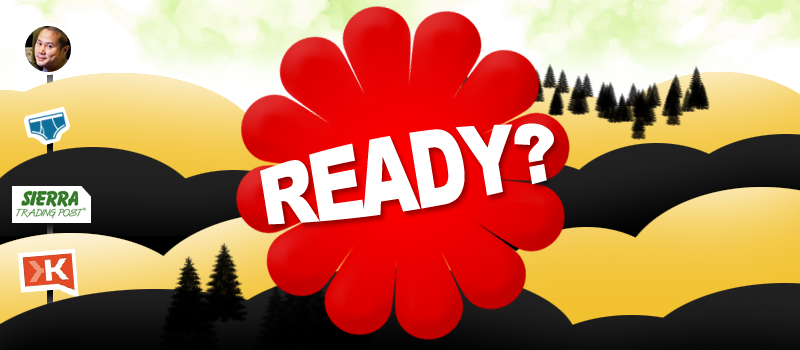
<style>
.page{position:relative;width:800px;height:350px}
.page>*{position:absolute;margin:0}
.t1{font:73px "Arial-Black";letter-spacing:-0.06em;color:#ffffff;text-transform:uppercase}
</style>
<div class="page">
<p class="t1" style="left:260px;top:123px;width:294px;height:102px;rotate:-9deg">READY?</p>
</div>
